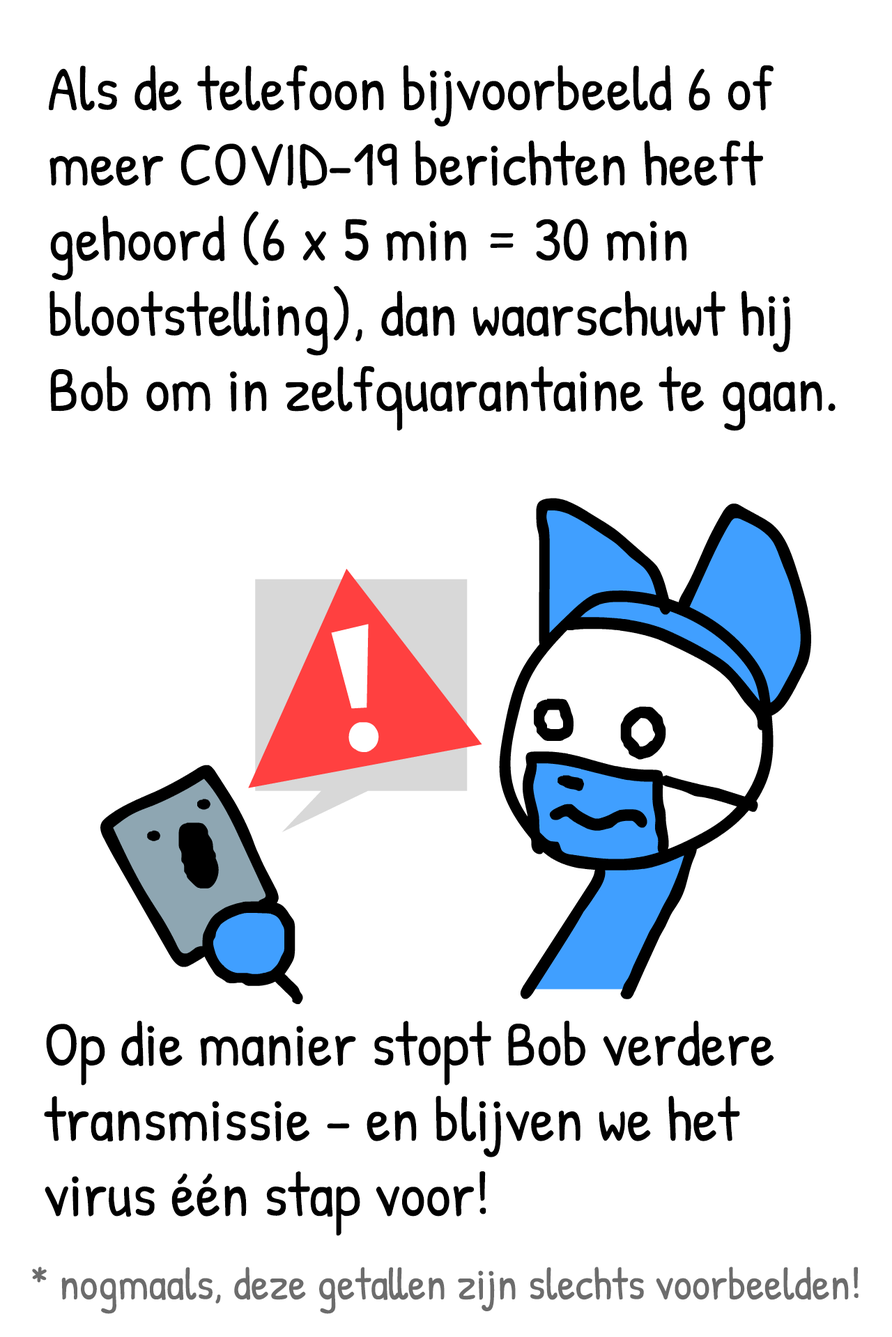
<style>
.page{position:relative;width:892px;height:1337px;background:#ffffff}
.page>*{position:absolute;margin:0}
.t1{font:62.7px "PatrickHand-Regular";color:#000000}
.t2{font:45.3px "PatrickHand-Regular";color:#6c6c6c}
</style>
<div class="page">
<p class="t1" style="left:49px;top:65px;width:786px;height:366px">Als de telefoon bijvoorbeeld 6 of<br>meer COVID-19 berichten heeft<br>gehoord (6 x 5 min = 30 min<br>blootstelling), dan waarschuwt hij<br>Bob om in zelfquarantaine te gaan.</p>
<p class="t1" style="left:44px;top:1020px;width:730px;height:216px">Op die manier stopt Bob verdere<br>transmissie – en blijven we het<br>virus één stap voor!</p>
<p class="t2" style="left:32px;top:1267px;width:826px;height:47px">* nogmaals, deze getallen zijn slechts voorbeelden!</p>
</div>
